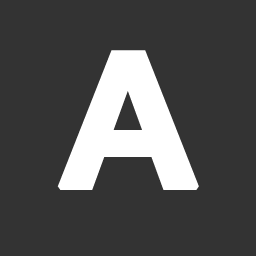
<style>
.page{position:relative;width:256px;height:256px;background:#333333}
.page>*{position:absolute;margin:0}
.t1{font:190px "BreezeSans-Bold";color:#ffffff;font-weight:bold;scale:1.05 1}
</style>
<div class="page">
<p class="t1" style="left:57px;top:50px;width:142px;height:140px">A</p>
</div>
